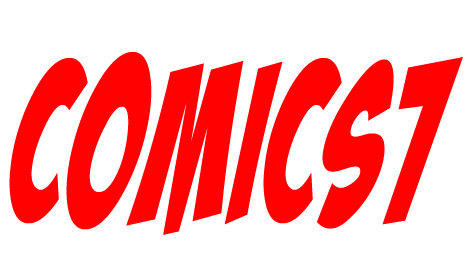
<style>
.page{position:relative;width:474px;height:260px;background:#ffffff}
.page>*{position:absolute;margin:0}
.t1{font:231.6px "BadaBoomBB";color:#ff0101;font-style:italic;scale:0.61 1}
</style>
<div class="page">
<p class="t1" style="left:9px;top:51px;width:454px;height:184px">COMICS7</p>
</div>
